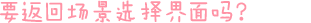
<style>
.page{position:relative;width:311px;height:23px;background:#ffffff}
.page>*{position:absolute;margin:0}
.t1{font:26px "¢è?";color:#ff93a5}
</style>
<div class="page">
<p class="t1" style="left:0px;top:0px;width:247px;height:23px">要返回场景选择界面吗？</p>
</div>
